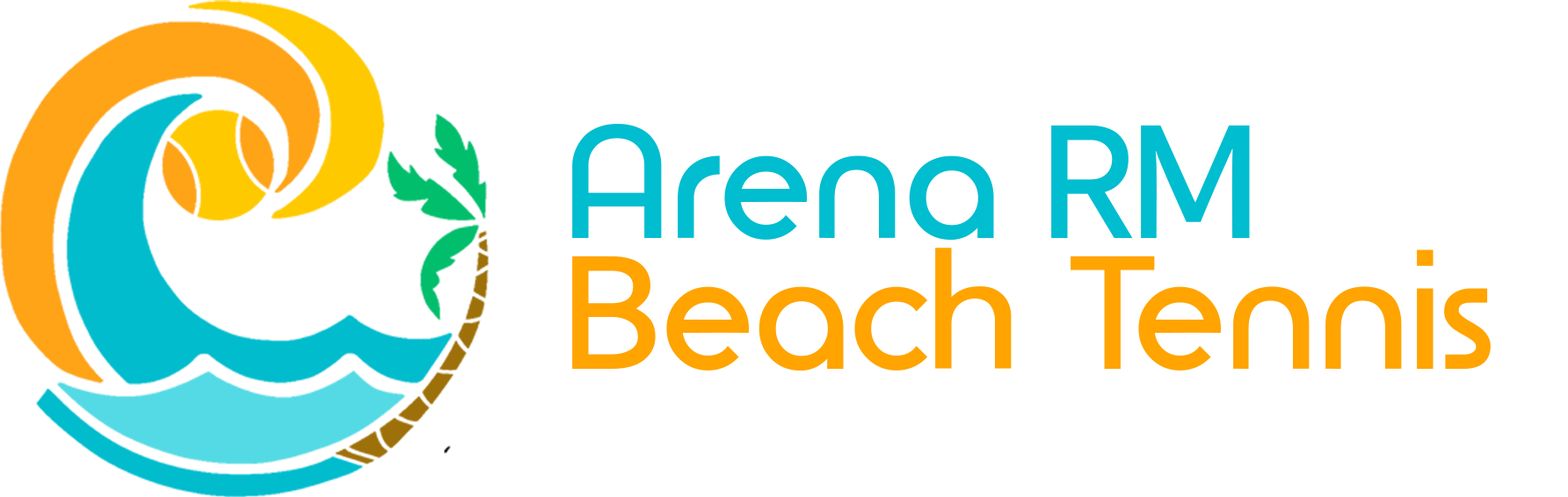
<style>
.page{position:relative;width:1568px;height:497px;background:#ffffff}
.page>*{position:absolute;margin:0}
.t1{font:160.7px "Astonpoliz";color:#00bdcf}
.t2{font:160.7px "Astonpoliz";color:#ffa400}
</style>
<div class="page">
<p class="t1" style="left:572px;top:124px;width:678px;height:117px">Arena RM</p>
<p class="t2" style="left:572px;top:248px;width:919px;height:124px">Beach Tennis</p>
</div>
